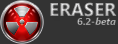
<style>
.page{position:relative;width:118px;height:44px;background:#333333}
.page>*{position:absolute;margin:0}
.t1{font:18.4px "SegoeUI-Bold"}
.t2{font:10px "SegoeUI-Bold";color:#a4a4a4}
.t3{font:10px "SegoeUI-BoldItalic";color:#a4a4a4}
</style>
<div class="page">
<p class="t1" style="left:50px;top:2px;width:67px;height:15px">ERASER</p>
<p class="t2" style="left:77px;top:17px;width:39px;height:8px">6.2-<span class="t3">beta</span></p>
</div>
